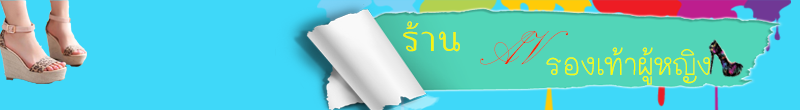
<style>
.page{position:relative;width:800px;height:110px;background:#3fd8f9}
.page>*{position:absolute;margin:0}
.t1{font:48px "THKoHo-Bold";color:#f7f40e}
.t2{font:60px "PalaceScriptMT";color:#f42908}
.t3{font:24px "Tahoma";color:#050505}
.t4{font:48px "THMaliGrade6-Bold";color:#f8fb0c}
</style>
<div class="page">
<p class="t1" style="left:403px;top:21px;width:57px;height:31px">ร้าน</p>
<p class="t2" style="left:480px;top:31px;width:88px;height:34px"><span class="t3">      </span>AV</p>
<p class="t4" style="left:546px;top:47px;width:164px;height:38px"><span class="t3">         </span>รองเท้าผู้หญิง</p>
</div>
